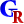
<style>
.page{position:relative;width:24px;height:24px;background:#ffffff}
.page>*{position:absolute;margin:0}
.t1{font:26px "MinionStd-Black"}
.t2{font:18px "MinionStd-Black"}
</style>
<div class="page">
<p class="t1" style="left:0px;top:0px;width:18px;height:17px">G</p>
<p class="t2" style="left:12px;top:11px;width:12px;height:12px">R</p>
</div>
